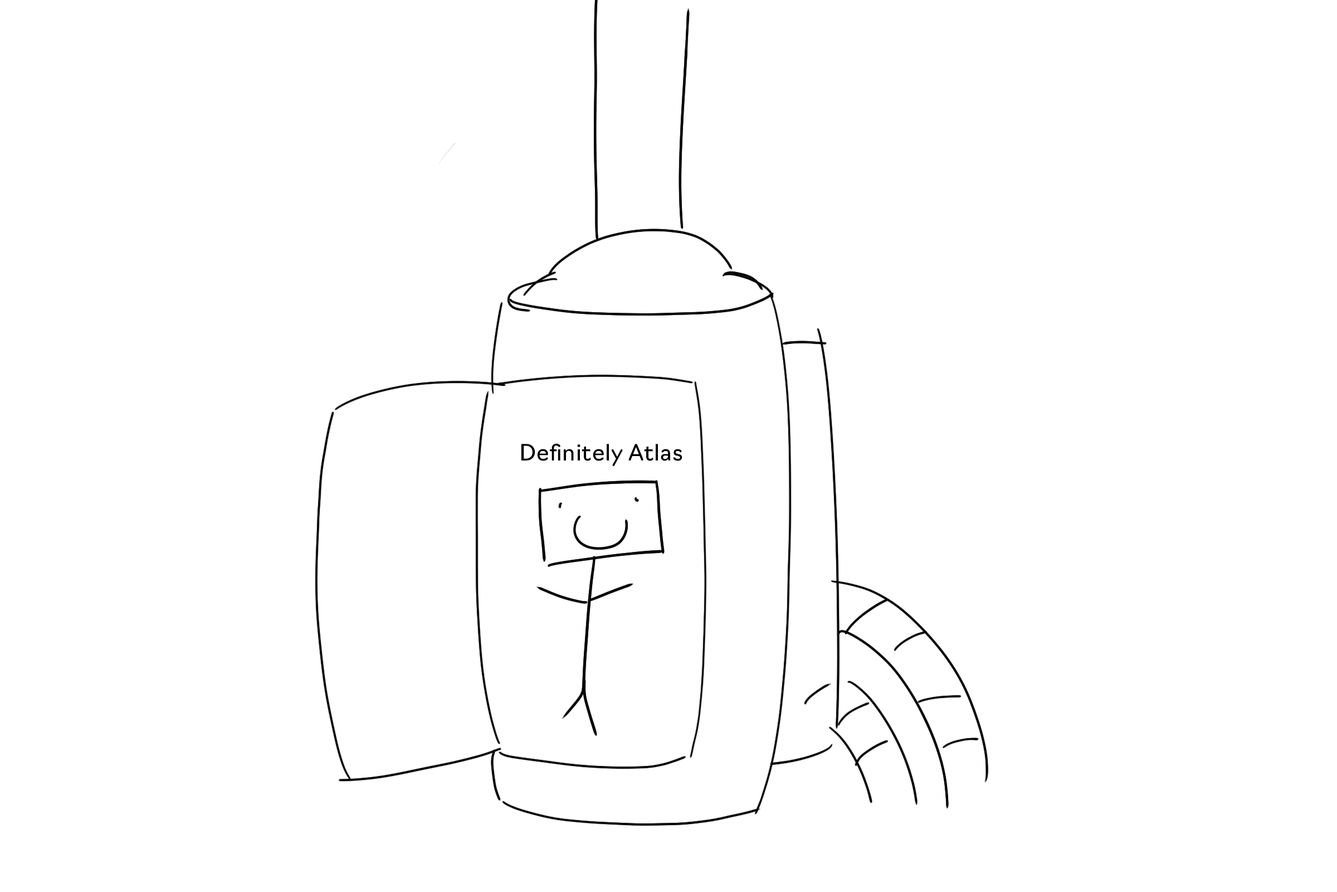
<style>
.page{position:relative;width:1337px;height:892px;background:#ffffff}
.page>*{position:absolute;margin:0}
.t1{font:22.2px "Navigo-Regular";letter-spacing:0.025em;color:#000000}
</style>
<div class="page">
<p class="t1" style="left:521px;top:443px;width:162px;height:23px">Definitely Atlas</p>
</div>
